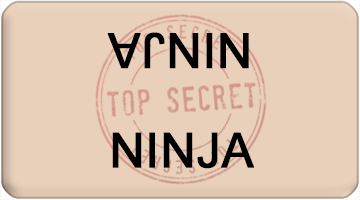
<style>
.page{position:relative;width:360px;height:200px;background:#e8d0bb}
.page>*{position:absolute;margin:0}
.t1{font:48px "ArialMT";color:#000000;font-weight:bold}
</style>
<div class="page">
<p class="t1" style="left:107px;top:32px;width:142px;height:37px;rotate:180deg">NINJA</p>
<p class="t1" style="left:112px;top:132px;width:142px;height:37px">NINJA</p>
</div>
